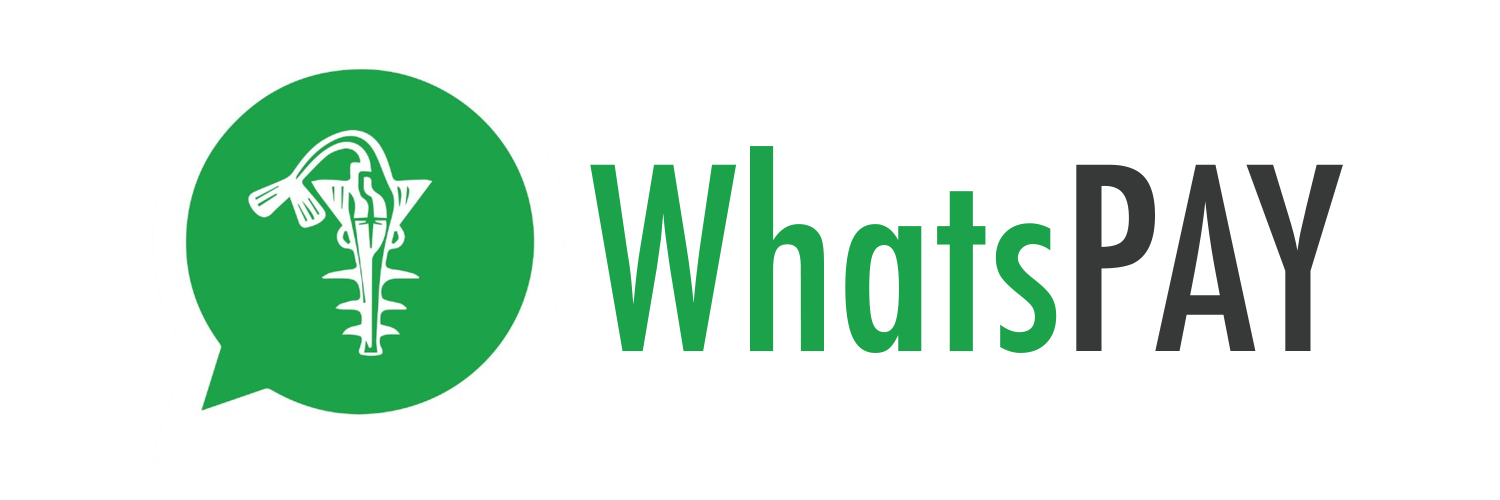
<style>
.page{position:relative;width:1500px;height:500px;background:#ffffff}
.page>*{position:absolute;margin:0}
.t1{font:247.4px "Futura-CondensedMedium";color:#1ba24b}
.t2{font:247.4px "Futura-CondensedMedium";color:#363937}
</style>
<div class="page">
<p class="t1" style="left:590px;top:146px;width:753px;height:207px">Whats<span class="t2">PAY</span></p>
</div>
